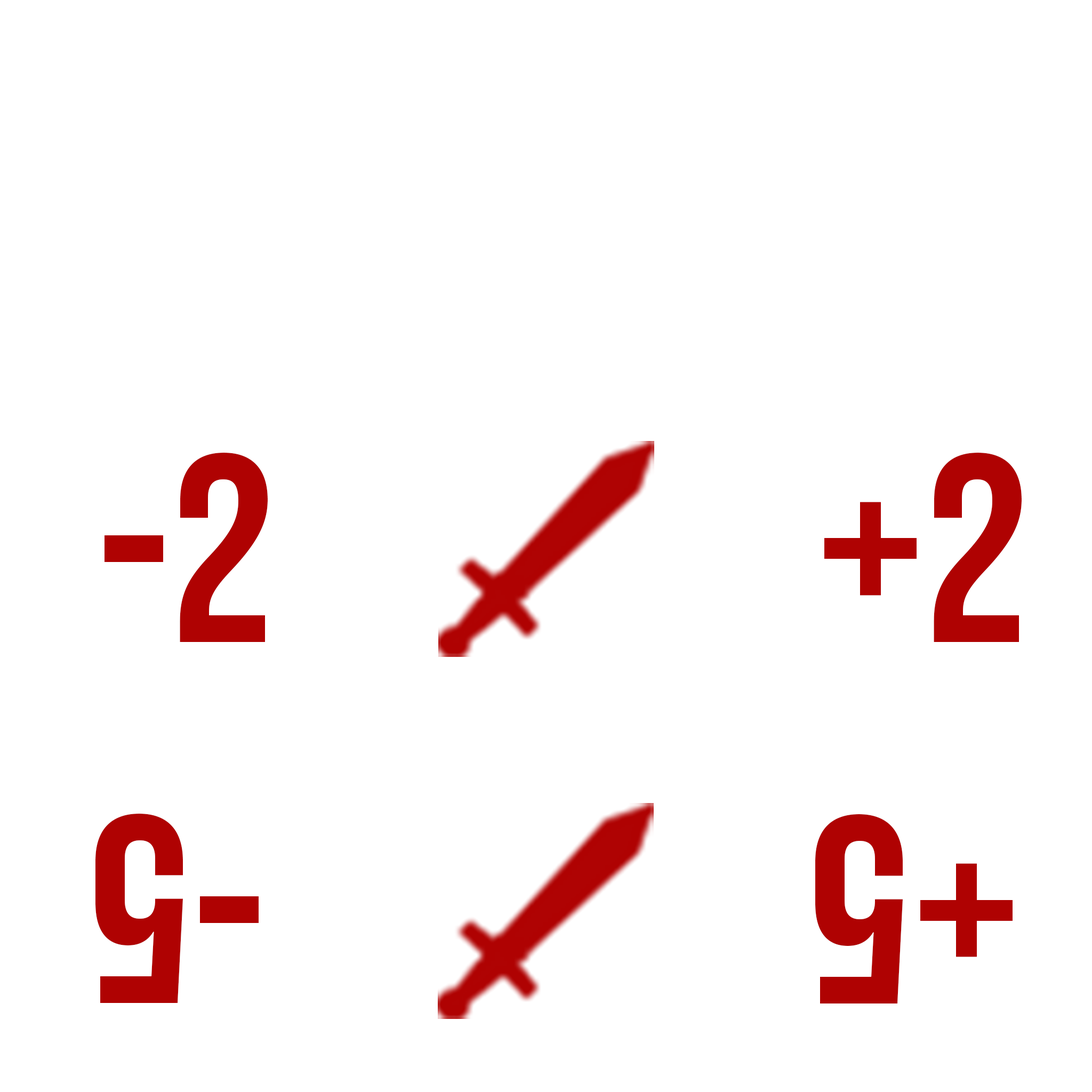
<style>
.page{position:relative;width:1092px;height:1092px;background:#ffffff}
.page>*{position:absolute;margin:0}
.t1{font:266.6px "BebasNeue-Regular";color:#af0202}
</style>
<div class="page">
<p class="t1" style="left:105px;top:453px;width:163px;height:189px">-2</p>
<p class="t1" style="left:824px;top:453px;width:198px;height:189px">+2</p>
<p class="t1" style="left:95px;top:814px;width:164px;height:189px;rotate:180deg">-5</p>
<p class="t1" style="left:815px;top:814px;width:198px;height:189px;rotate:180deg">+5</p>
</div>
